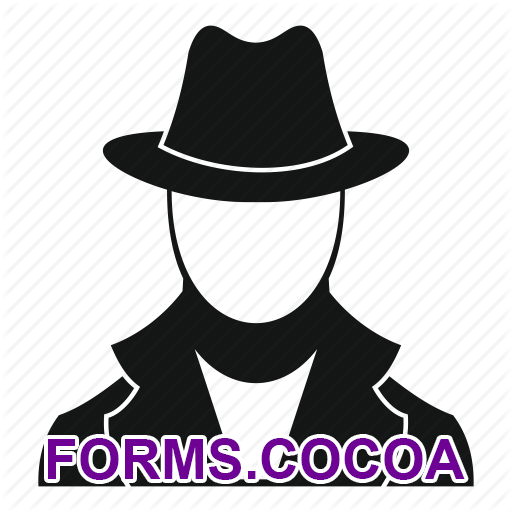
<style>
.page{position:relative;width:512px;height:512px;background:#ffffff}
.page>*{position:absolute;margin:0}
.t1{font:55.2px "Arial-BoldMT";color:#6d0295}
</style>
<div class="page">
<p class="t1" style="left:48px;top:438px;width:417px;height:42px">FORMS.COCOA</p>
</div>
